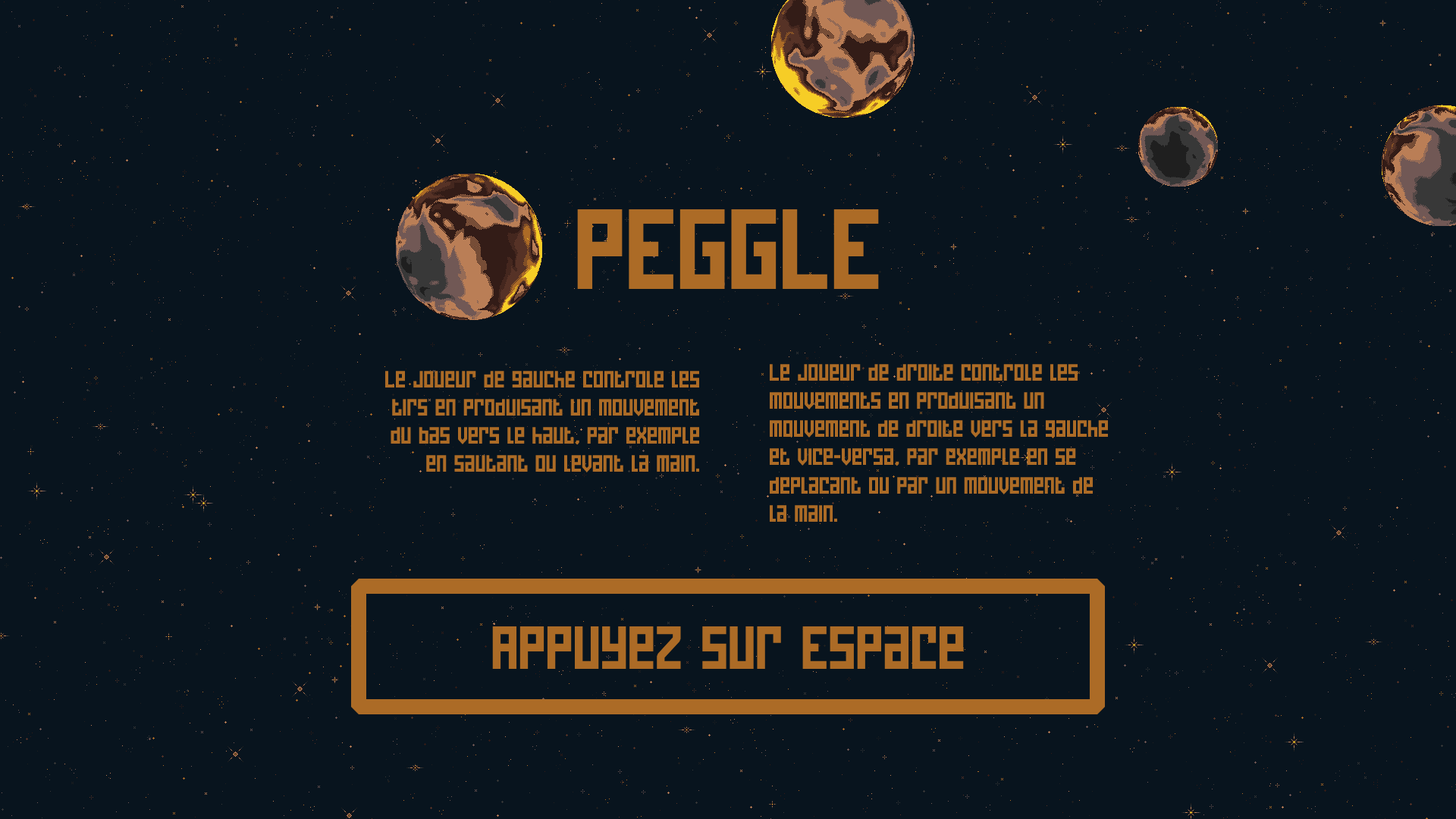
<style>
.page{position:relative;width:1456px;height:819px;background:#08141e}
.page>*{position:absolute;margin:0}
.t1{font:113.7px "PixelBitFree";color:#ac6b26}
.t2{font:23.5px "PixelBitFree";color:#ac6b26}
.t3{font:60.7px "PixelBitFree";color:#ac6b26}
</style>
<div class="page">
<p class="t1" style="left:577px;top:209px;width:302px;height:80px">PEGGLE</p>
<p class="t2" style="left:769px;top:364px;width:339px;height:158px">Le joueur de droite contrôle les mouvements en produisant un mouvement de droite vers la gauche et vice-versa, par exemple en se déplaçant ou par un mouvement de la main.</p>
<p class="t2" style="left:385px;top:371px;width:315px;height:101px;text-align:right">Le joueur de gauche contrôle les tirs en produisant un mouvement du bas vers le haut, par exemple en sautant ou levant la main.</p>
<p class="t3" style="left:492px;top:626px;width:472px;height:43px">APPuyez sur Espace</p>
</div>
